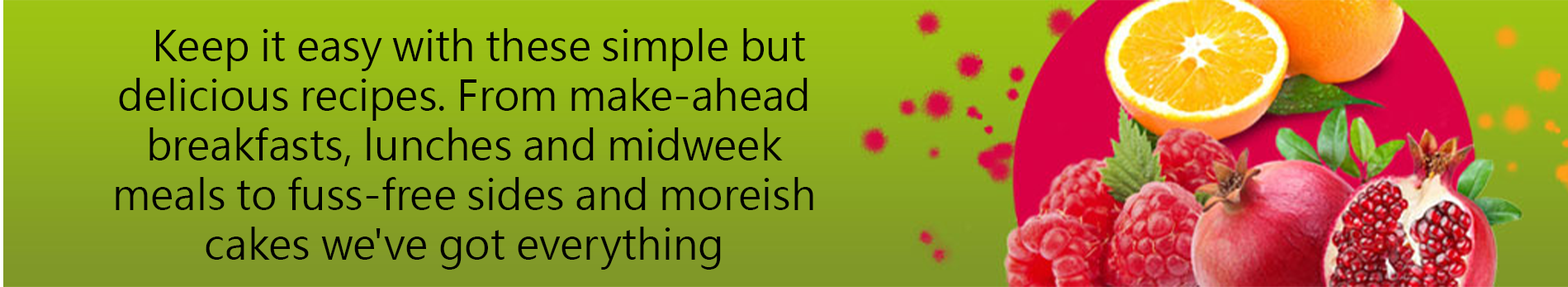
<style>
.page{position:relative;width:1568px;height:287px}
.page>*{position:absolute;margin:0}
.t1{font:41.3px "MicrosoftJhengHeiUIRegular";color:#000000}
</style>
<div class="page">
<p class="t1" style="left:116px;top:28px;width:697px;height:241px;text-align:center">Keep it easy with these simple but delicious recipes. From make-ahead breakfasts, lunches and midweek meals to fuss-free sides and moreish cakes we've got everything</p>
</div>
